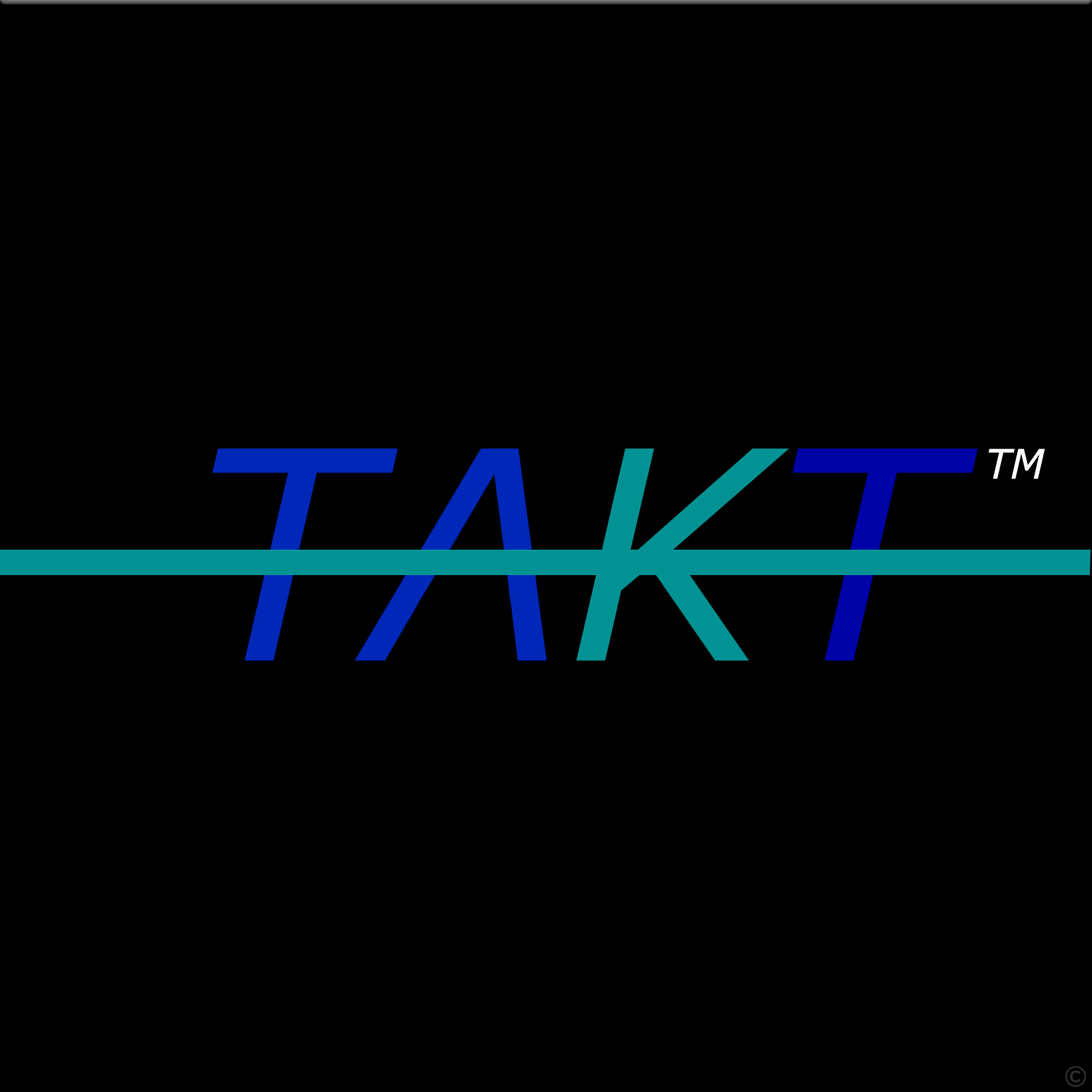
<style>
.page{position:relative;width:1092px;height:1092px;background:#000000}
.page>*{position:absolute;margin:0}
.t1{font:291.2px "Verdana-Italic";color:#0027b8}
.t2{font:291.2px "Verdana-Italic";color:#039294}
.t3{font:291.2px "Verdana-Italic";color:#0004a7}
.t4{font:40.4px "Verdana-Italic";color:#ffffff}
.t5{font:24.3px "Verdana";color:#2e2e2e}
</style>
<div class="page">
<p class="t1" style="left:213px;top:448px;width:765px;height:213px">TA<span class="t2">K</span><span class="t3">T</span></p>
<p class="t4" style="left:989px;top:448px;width:56px;height:31px">TM</p>
<p class="t5" style="left:1065px;top:1066px;width:21px;height:21px">©</p>
</div>
